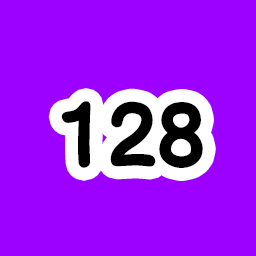
<style>
.page{position:relative;width:256px;height:256px;background:#9c00ff}
.page>*{position:absolute;margin:0}
.t1{font:90px "ComicHelvetic-Medium";color:#000000}
</style>
<div class="page">
<p class="t1" style="left:61px;top:101px;width:142px;height:67px">128</p>
</div>
